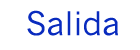
<style>
.page{position:relative;width:140px;height:50px;background:#ffffff}
.page>*{position:absolute;margin:0}
.t1{font:32px "NewsGothicMT";color:#092bbe}
</style>
<div class="page">
<p class="t1" style="left:27px;top:10px;width:91px;height:26px">Salida</p>
</div>
